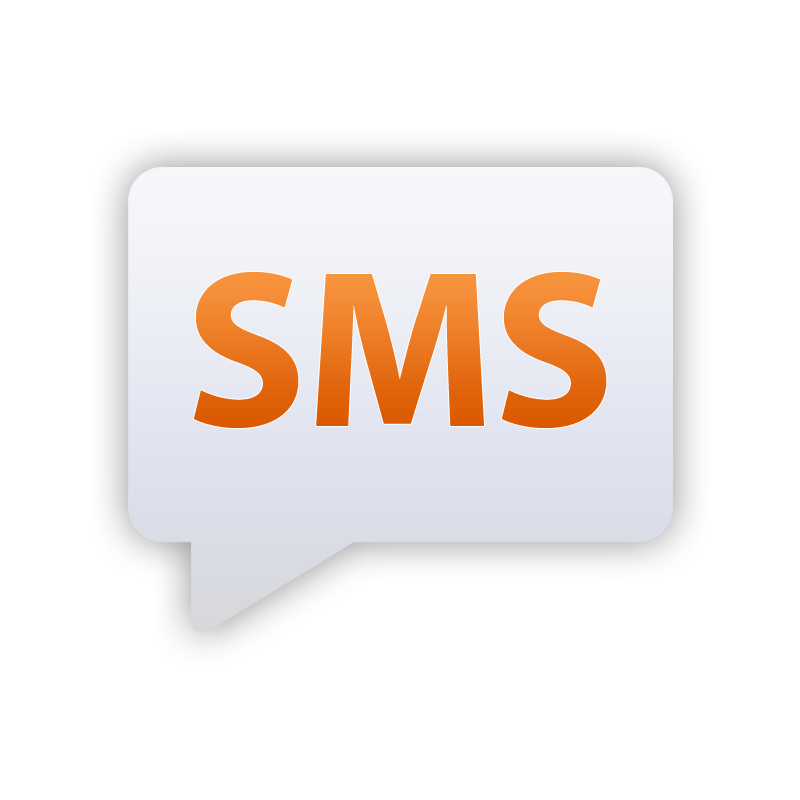
<style>
.page{position:relative;width:800px;height:800px;background:#ffffff}
.page>*{position:absolute;margin:0}
.t1{font:225.4px "MyriadPro-Bold";letter-spacing:-0.01em}
</style>
<div class="page">
<p class="t1" style="left:193px;top:271px;width:414px;height:157px">SMS</p>
</div>
